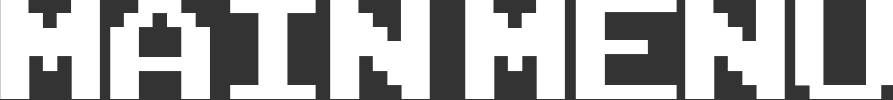
<style>
.page{position:relative;width:893px;height:100px;background:#ffffff}
.page>*{position:absolute;margin:0}
.t1{font:200px "ArcadeClassic";color:#ffffff}
</style>
<div class="page">
<p class="t1" style="left:0px;top:0px;width:895px;height:99px">Main menu</p>
</div>
